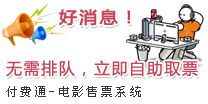
<style>
.page{position:relative;width:208px;height:104px;background:#ffffff}
.page>*{position:absolute;margin:0}
.t1{font:16.2px "MicrosoftYaHei";letter-spacing:0.1em;color:#cb4255;font-weight:bold;scale:1.11 1}
.t2{font:16px "MicrosoftYaHei";letter-spacing:0.1em;color:#cb4255}
.t3{font:12px "SimSun";letter-spacing:0.2em;color:#333333}
</style>
<div class="page">
<p class="t1" style="left:59px;top:9px;width:72px;height:17px">好消息！</p>
<p class="t2" style="left:6px;top:60px;width:192px;height:17px">无需排队，立即自助取票</p>
<p class="t3" style="left:6px;top:86px;width:135px;height:11px">付费通-电影售票系统</p>
</div>
